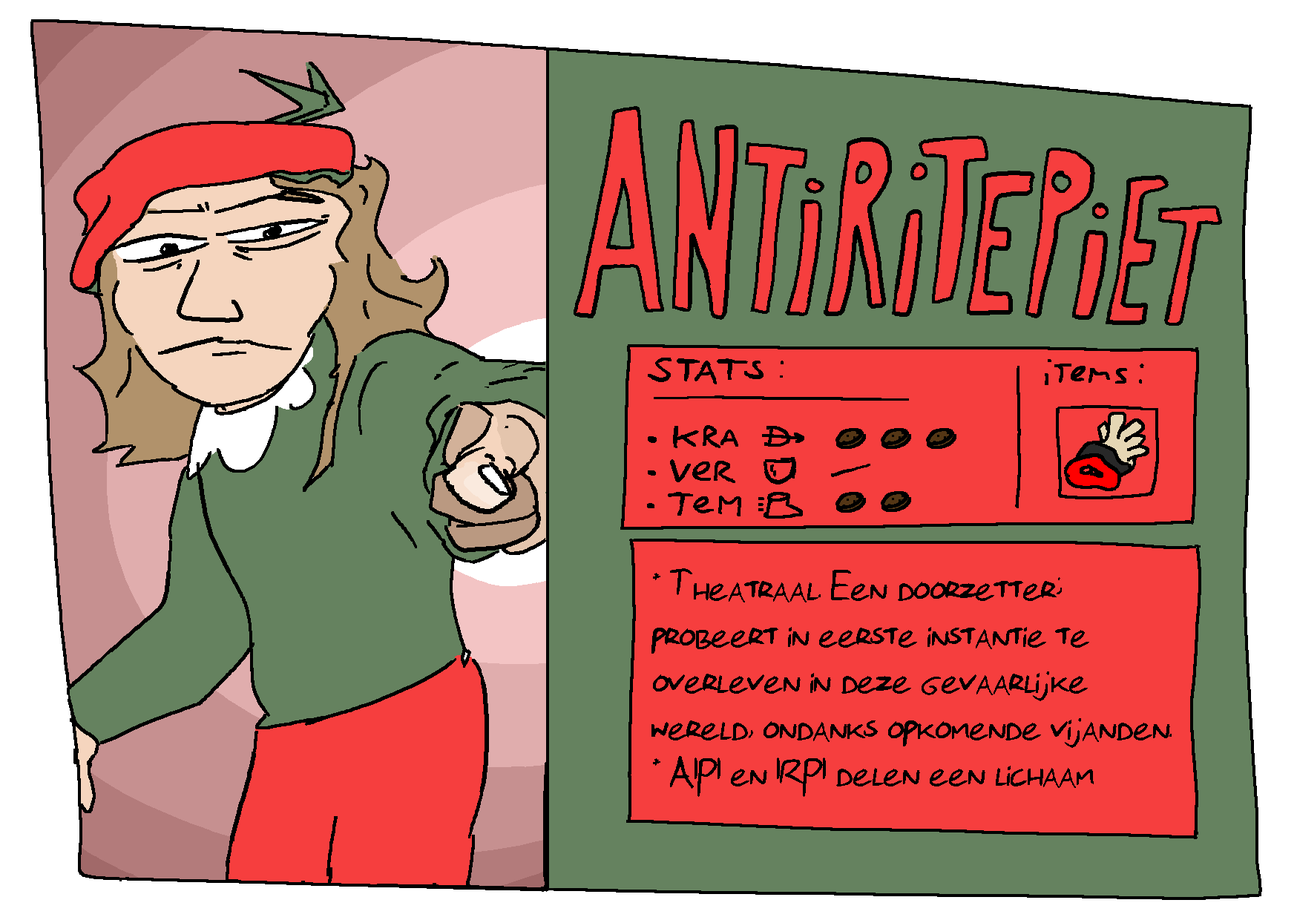
<style>
.page{position:relative;width:1297px;height:920px;background:#65825f}
.page>*{position:absolute;margin:0}
.t1{font:40.2px/46.4px "Florisfont2-Regular";color:#000000}
</style>
<div class="page">
<p class="t1" style="left:651px;top:568px;width:520px;height:229px">* Theatraal. Een doorzetter; <br>probeert in eerste instantie te <br>overleven in deze gevaarlijke <br>wereld, ondanks opkomende vijanden.<br>* AIPI en IRPI delen een lichaam</p>
</div>
